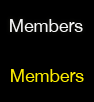
<style>
.page{position:relative;width:94px;height:102px;background:#000000}
.page>*{position:absolute;margin:0}
.t1{font:17.6px "HelveticaNeue";color:#ffffff}
.t2{font:17.6px "HelveticaNeue";color:#fced00}
</style>
<div class="page">
<p class="t1" style="left:10px;top:19px;width:73px;height:13px">Members</p>
<p class="t2" style="left:11px;top:69px;width:73px;height:13px">Members</p>
</div>
